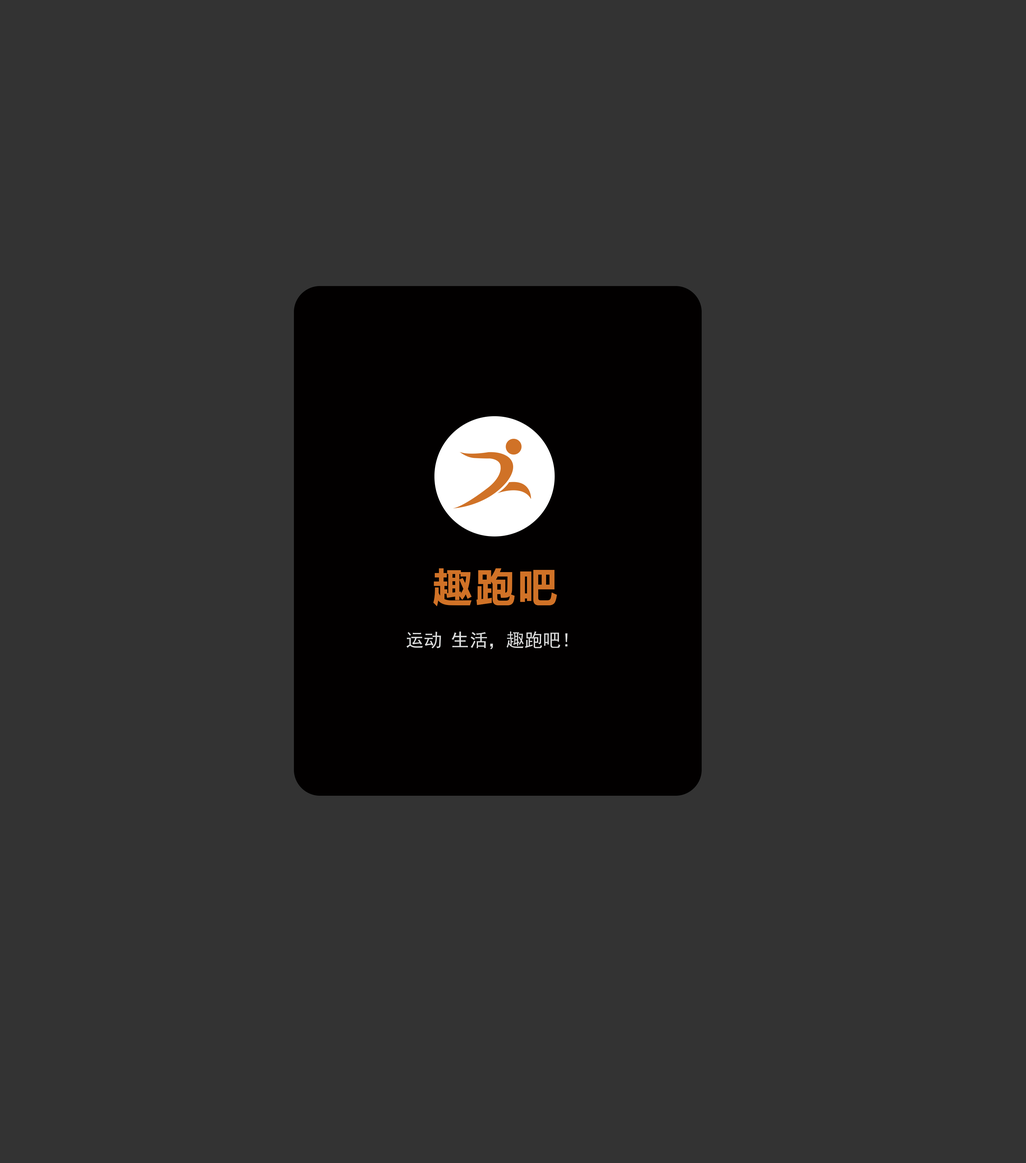
<style>
.page{position:relative;width:1026px;height:1163px;background:#333333}
.page>*{position:absolute;margin:0}
.t1{font:39.2px "MicrosoftYaHei-Bold";color:#d07227}
.t2{font:18.3px "SimHei";color:#dbdcdc}
</style>
<div class="page">
<p class="t1" style="left:433px;top:568px;width:124px;height:38px">趣跑吧</p>
<p class="t2" style="left:406px;top:631px;width:162px;height:18px">运动 生活，趣跑吧！</p>
</div>
